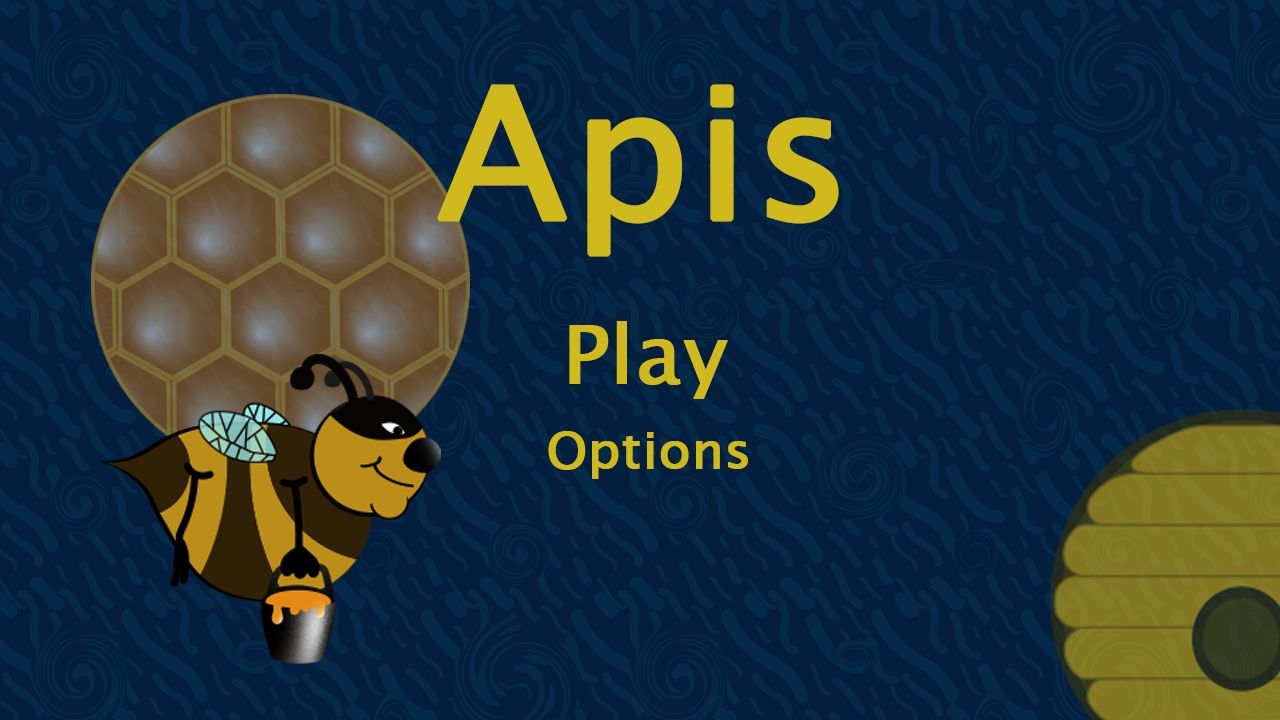
<style>
.page{position:relative;width:1280px;height:720px;background:#031f3d}
.page>*{position:absolute;margin:0}
.t1{font:182px "LucidaSansUnicode";color:#d0b91b;font-weight:bold;scale:1.03 1}
.t2{font:80px "LucidaSansUnicode";color:#d0b91b;font-weight:bold;scale:1.03 1}
.t3{font:50px "LucidaSansUnicode";color:#d0b91b;font-weight:bold;scale:1.03 1}
</style>
<div class="page">
<p class="t1" style="left:437px;top:84px;width:402px;height:173px">Apis</p>
<p class="t2" style="left:569px;top:321px;width:159px;height:78px">Play</p>
<p class="t3" style="left:548px;top:431px;width:200px;height:48px">Options</p>
</div>
